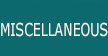
<style>
.page{position:relative;width:108px;height:56px;background:#0c696e}
.page>*{position:absolute;margin:0}
.t1{font:18px "Verdana";color:#fdfef9;scale:0.69 1}
</style>
<div class="page">
<p class="t1" style="left:1px;top:22px;width:107px;height:15px">MISCELLANEOUS</p>
</div>
